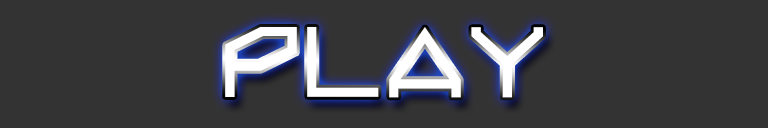
<style>
.page{position:relative;width:768px;height:128px;background:#333333}
.page>*{position:absolute;margin:0}
.t1{font:100px "KinineAlpha";color:#ffffff}
</style>
<div class="page">
<p class="t1" style="left:225px;top:27px;width:318px;height:71px">Play</p>
</div>
